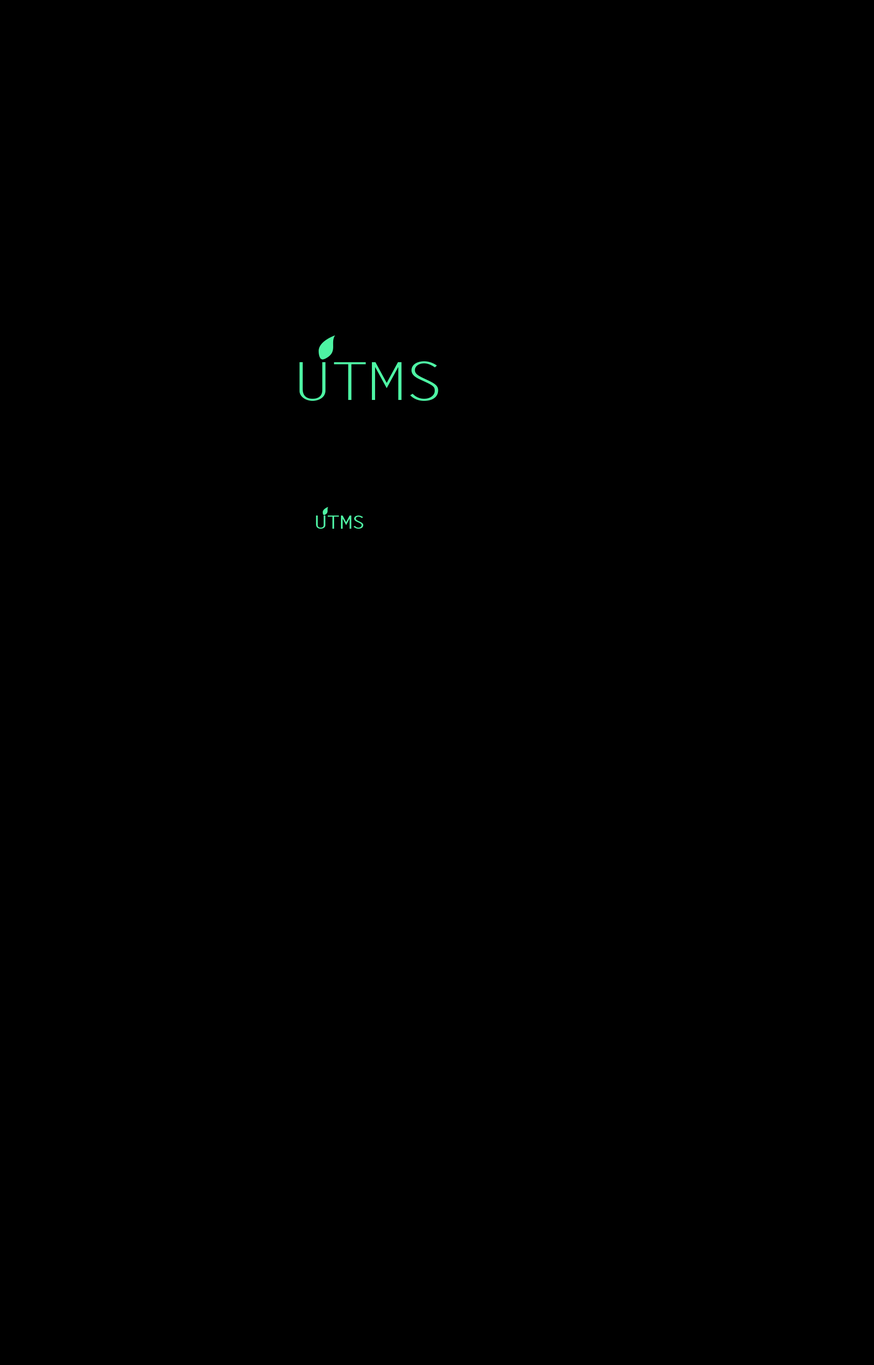
<style>
.page{position:relative;width:874px;height:1365px;background:#000000}
.page>*{position:absolute;margin:0}
.t1{font:52.3px "LetterGothicStd";letter-spacing:-0.06em;color:#4ef3a4;scale:1.31 1}
.t2{font:17.7px "LetterGothicStd-Bold";letter-spacing:-0.06em;color:#4ef3a3;scale:1.31 1}
</style>
<div class="page">
<p class="t1" style="left:299px;top:361px;width:139px;height:40px">UTMS</p>
<p class="t2" style="left:316px;top:516px;width:47px;height:13px">UTMS</p>
</div>
